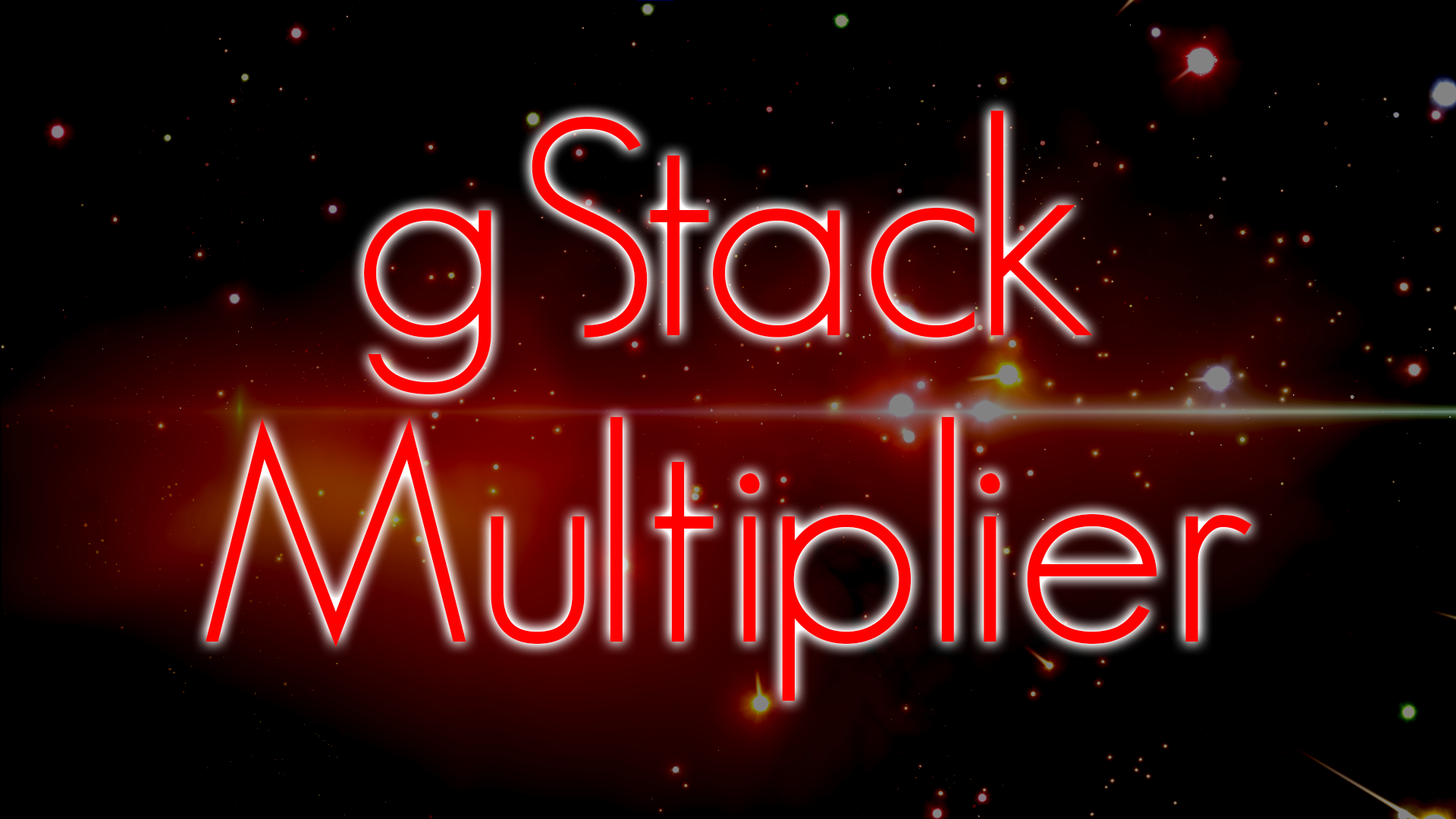
<style>
.page{position:relative;width:1456px;height:819px;background:#000000}
.page>*{position:absolute;margin:0}
.t1{font:303.3px "GeosansLight-NMS";color:#ff0000}
</style>
<div class="page">
<p class="t1" style="left:364px;top:110px;width:729px;height:284px">gStack</p>
<p class="t1" style="left:206px;top:416px;width:1046px;height:285px">Multiplier</p>
</div>
